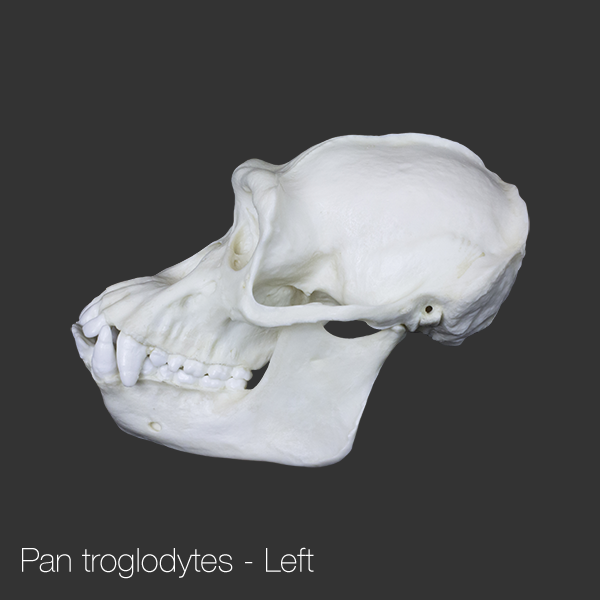
<style>
.page{position:relative;width:600px;height:600px;background:#333333}
.page>*{position:absolute;margin:0}
.t1{font:33.3px "HelveticaNeue-Thin";color:#ffffff}
</style>
<div class="page">
<p class="t1" style="left:22px;top:547px;width:292px;height:32px">Pan troglodytes - Left</p>
</div>
